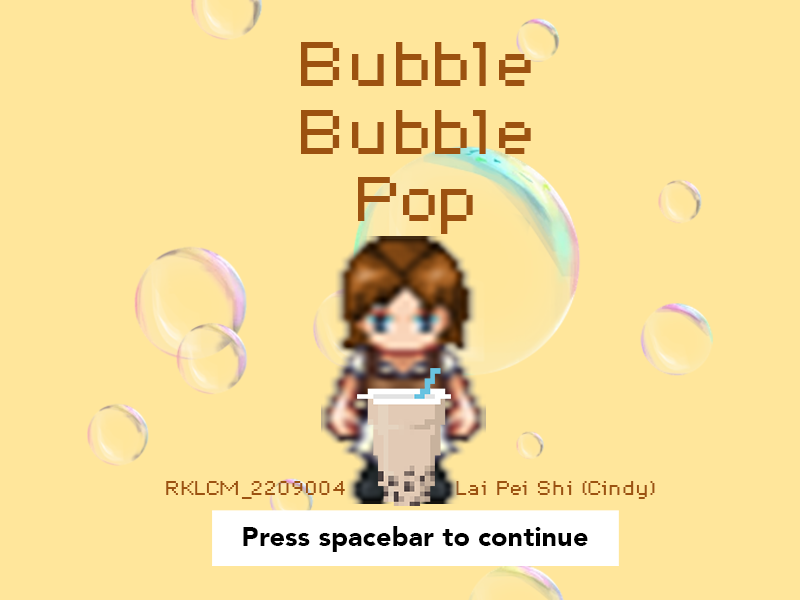
<style>
.page{position:relative;width:800px;height:600px;background:#ffe69b}
.page>*{position:absolute;margin:0}
.t1{font:56.2px "DePixel-Breit";color:#9c5210}
.t2{font:18.3px "DePixel-Breit";color:#9c5210;scale:0.93 1}
.t3{font:27px "AvenirLT-Black";color:#000000}
</style>
<div class="page">
<p class="t1" style="left:301px;top:42px;width:230px;height:192px;text-align:center">Bubble<br>Bubble<br>Pop</p>
<p class="t2" style="left:166px;top:481px;width:179px;height:18px">RKLCM_2209004</p>
<p class="t2" style="left:456px;top:481px;width:199px;height:18px">Lai Pei Shi (Cindy)</p>
<p class="t3" style="left:243px;top:526px;width:345px;height:26px">Press spacebar to continue</p>
</div>
